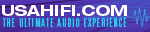
<style>
.page{position:relative;width:150px;height:32px}
.page>*{position:absolute;margin:0}
.t1{font:15.4px "HelveticaNeueLTStd-BdEx";color:#fdfdfd}
.t2{font:11.4px "UniversLTStd-LightUltraCn";letter-spacing:0.11em;color:#27cfed}
</style>
<div class="page">
<p class="t1" style="left:2px;top:5px;width:125px;height:11px">USAHIFI.COM</p>
<p class="t2" style="left:3px;top:18px;width:124px;height:9px">THE ULTIMATE AUDIO EXPERIENCE</p>
</div>
